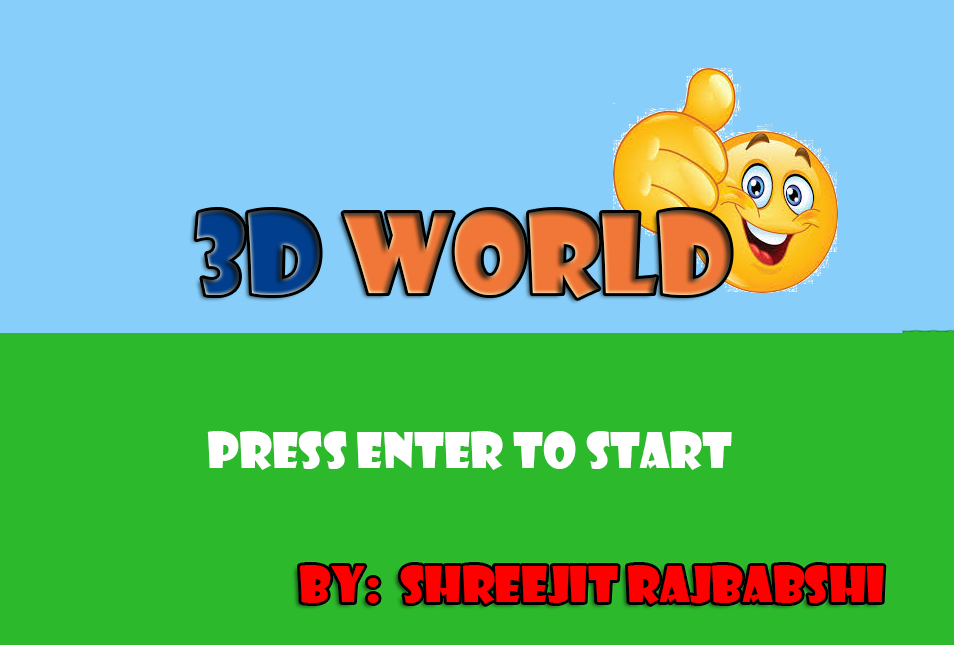
<style>
.page{position:relative;width:954px;height:645px;background:#2cb92c}
.page>*{position:absolute;margin:0}
.t1{font:107px "ShowcardGothic-Reg";color:#f07737}
.t2{font:107px "ShowcardGothic-Reg";color:#013e8d}
.t3{font:48px "ShowcardGothic-Reg";color:#ffffff}
.t4{font:48px "ShowcardGothic-Reg";color:#ff0000}
</style>
<div class="page">
<p class="t1" style="left:196px;top:210px;width:535px;height:88px"><span class="t2">3D</span> WORLD</p>
<p class="t3" style="left:207px;top:431px;width:525px;height:39px">Press Enter to Start</p>
<p class="t4" style="left:300px;top:565px;width:584px;height:39px">By:  Shreejit Rajbabshi</p>
</div>
